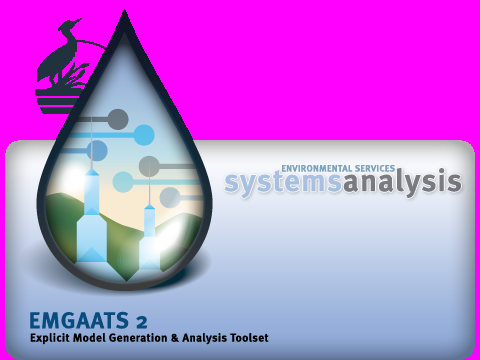
<style>
.page{position:relative;width:480px;height:360px;background:#ff00ff}
.page>*{position:absolute;margin:0}
.t1{font:31.2px "MetaBold-Roman";letter-spacing:0.04em}
.t2{font:9.1px "MetaBold-Roman";letter-spacing:0.04em;color:#7ea1bc}
.t3{font:22.9px "MetaBold-Roman";letter-spacing:0.04em;color:#084b7d}
.t4{font:11.5px "MetaBold-Roman";letter-spacing:0.04em;color:#000000}
</style>
<div class="page">
<p class="t1" style="left:224px;top:167px;width:237px;height:32px">systemsanalysis</p>
<p class="t2" style="left:282px;top:164px;width:113px;height:8px">ENVIRONMENTAL SERVICES</p>
<p class="t3" style="left:30px;top:311px;width:118px;height:18px">EMGAATS 2</p>
<p class="t4" style="left:30px;top:333px;width:239px;height:12px">Explicit Model Generation &amp; Analysis Toolset</p>
</div>
